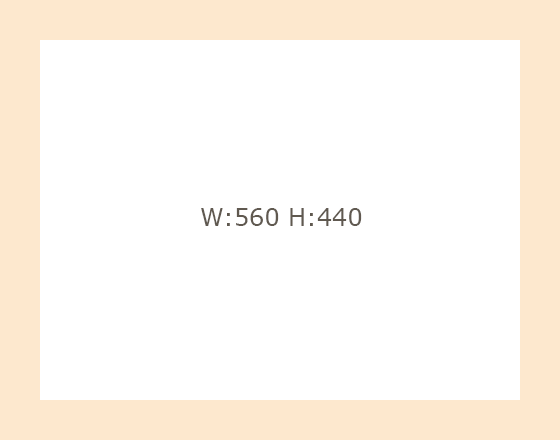
<style>
.page{position:relative;width:560px;height:440px;background:#ffffff}
.page>*{position:absolute;margin:0}
.t1{font:24px "Verdana";color:#605950}
</style>
<div class="page">
<p class="t1" style="left:201px;top:208px;width:161px;height:18px">W:560 H:440</p>
</div>
